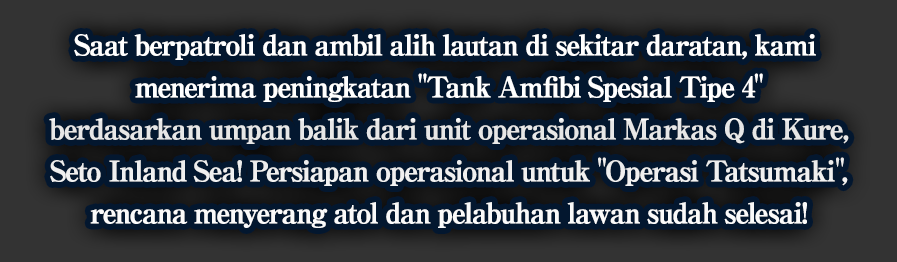
<style>
.page{position:relative;width:897px;height:262px;background:#03172f}
.page>*{position:absolute;margin:0}
.t1{font:28px/42px "RyuminPro-ExBold";letter-spacing:-0.08em;color:#ffffff;font-weight:bold}
</style>
<div class="page">
<p class="t1" style="left:49px;top:34px;width:800px;height:194px;text-align:center">Saat berpatroli dan ambil alih lautan di sekitar daratan, kami <br>menerima peningkatan "Tank Amfibi Spesial Tipe 4"<br>berdasarkan umpan balik dari unit operasional Markas Q di Kure,<br>Seto Inland Sea! Persiapan operasional untuk "Operasi Tatsumaki",<br>rencana menyerang atol dan pelabuhan lawan sudah selesai!</p>
</div>
